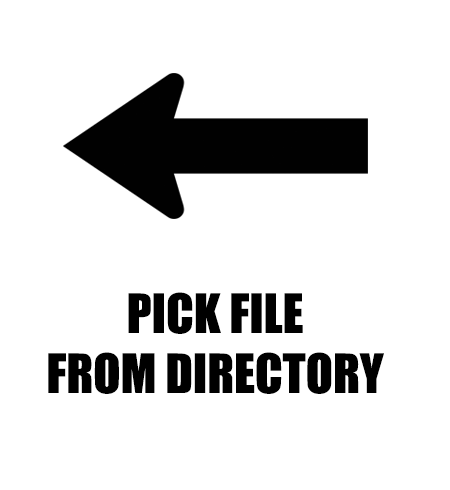
<style>
.page{position:relative;width:450px;height:490px;background:#ffffff}
.page>*{position:absolute;margin:0}
.t1{font:12px "Impact";color:#000000}
</style>
<div class="page">
<p class="t1" style="left:48px;top:292px;width:336px;height:102px;text-align:center">PICK FILE<br>FROM DIRECTORY</p>
</div>
